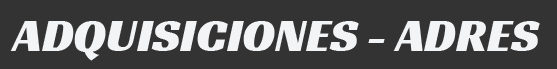
<style>
.page{position:relative;width:557px;height:69px;background:#333333}
.page>*{position:absolute;margin:0}
.t1{font:48px "RacingSansOne-Regular";color:#f2f4f6}
</style>
<div class="page">
<p class="t1" style="left:10px;top:21px;width:530px;height:40px">ADQUISICIONES - ADRES</p>
</div>
